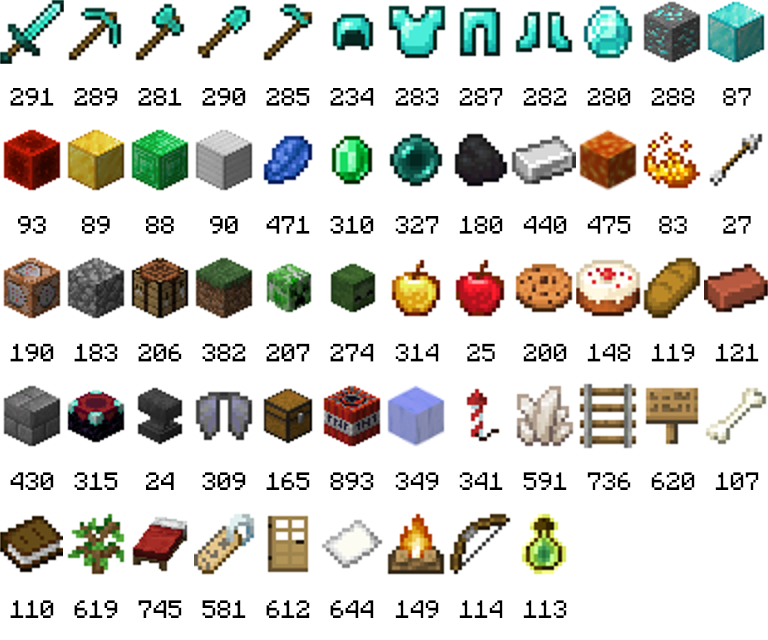
<style>
.page{position:relative;width:768px;height:640px;background:#ffffff}
.page>*{position:absolute;margin:0}
.t1{font:20px "Minecraft";color:#000000}
</style>
<div class="page">
<p class="t1" style="left:10px;top:88px;width:44px;height:18px">291</p>
<p class="t1" style="left:74px;top:88px;width:44px;height:18px">289</p>
<p class="t1" style="left:138px;top:88px;width:44px;height:18px">281</p>
<p class="t1" style="left:202px;top:88px;width:44px;height:18px">290</p>
<p class="t1" style="left:266px;top:88px;width:44px;height:18px">285</p>
<p class="t1" style="left:330px;top:88px;width:44px;height:18px">234</p>
<p class="t1" style="left:395px;top:88px;width:44px;height:18px">283</p>
<p class="t1" style="left:459px;top:88px;width:44px;height:18px">287</p>
<p class="t1" style="left:523px;top:88px;width:44px;height:18px">282</p>
<p class="t1" style="left:587px;top:88px;width:44px;height:18px">280</p>
<p class="t1" style="left:651px;top:88px;width:44px;height:18px">288</p>
<p class="t1" style="left:723px;top:88px;width:28px;height:18px">87</p>
<p class="t1" style="left:18px;top:216px;width:28px;height:18px">93</p>
<p class="t1" style="left:82px;top:216px;width:28px;height:18px">89</p>
<p class="t1" style="left:146px;top:216px;width:28px;height:18px">88</p>
<p class="t1" style="left:210px;top:216px;width:28px;height:18px">90</p>
<p class="t1" style="left:266px;top:216px;width:44px;height:18px">471</p>
<p class="t1" style="left:330px;top:216px;width:44px;height:18px">310</p>
<p class="t1" style="left:395px;top:216px;width:44px;height:18px">327</p>
<p class="t1" style="left:459px;top:216px;width:44px;height:18px">180</p>
<p class="t1" style="left:523px;top:216px;width:44px;height:18px">440</p>
<p class="t1" style="left:587px;top:216px;width:44px;height:18px">475</p>
<p class="t1" style="left:659px;top:216px;width:28px;height:18px">83</p>
<p class="t1" style="left:723px;top:216px;width:28px;height:18px">27</p>
<p class="t1" style="left:10px;top:343px;width:44px;height:19px">190</p>
<p class="t1" style="left:74px;top:343px;width:44px;height:19px">183</p>
<p class="t1" style="left:138px;top:343px;width:44px;height:19px">206</p>
<p class="t1" style="left:202px;top:343px;width:44px;height:19px">382</p>
<p class="t1" style="left:266px;top:343px;width:44px;height:19px">207</p>
<p class="t1" style="left:330px;top:343px;width:44px;height:19px">274</p>
<p class="t1" style="left:395px;top:343px;width:44px;height:19px">314</p>
<p class="t1" style="left:467px;top:343px;width:28px;height:19px">25</p>
<p class="t1" style="left:523px;top:343px;width:44px;height:19px">200</p>
<p class="t1" style="left:587px;top:343px;width:44px;height:19px">148</p>
<p class="t1" style="left:651px;top:343px;width:44px;height:19px">119</p>
<p class="t1" style="left:715px;top:343px;width:44px;height:19px">121</p>
<p class="t1" style="left:10px;top:472px;width:44px;height:18px">430</p>
<p class="t1" style="left:74px;top:472px;width:44px;height:18px">315</p>
<p class="t1" style="left:146px;top:472px;width:28px;height:18px">24</p>
<p class="t1" style="left:202px;top:472px;width:44px;height:18px">309</p>
<p class="t1" style="left:266px;top:472px;width:44px;height:18px">165</p>
<p class="t1" style="left:330px;top:472px;width:44px;height:18px">893</p>
<p class="t1" style="left:395px;top:472px;width:44px;height:18px">349</p>
<p class="t1" style="left:459px;top:472px;width:44px;height:18px">341</p>
<p class="t1" style="left:523px;top:472px;width:44px;height:18px">591</p>
<p class="t1" style="left:587px;top:472px;width:44px;height:18px">736</p>
<p class="t1" style="left:651px;top:472px;width:44px;height:18px">620</p>
<p class="t1" style="left:715px;top:472px;width:44px;height:18px">107</p>
<p class="t1" style="left:10px;top:600px;width:44px;height:18px">110</p>
<p class="t1" style="left:74px;top:600px;width:44px;height:18px">619</p>
<p class="t1" style="left:138px;top:600px;width:44px;height:18px">745</p>
<p class="t1" style="left:202px;top:600px;width:44px;height:18px">581</p>
<p class="t1" style="left:266px;top:600px;width:44px;height:18px">612</p>
<p class="t1" style="left:330px;top:600px;width:44px;height:18px">644</p>
<p class="t1" style="left:395px;top:600px;width:44px;height:18px">149</p>
<p class="t1" style="left:459px;top:600px;width:44px;height:18px">114</p>
<p class="t1" style="left:523px;top:600px;width:44px;height:18px">113</p>
</div>
